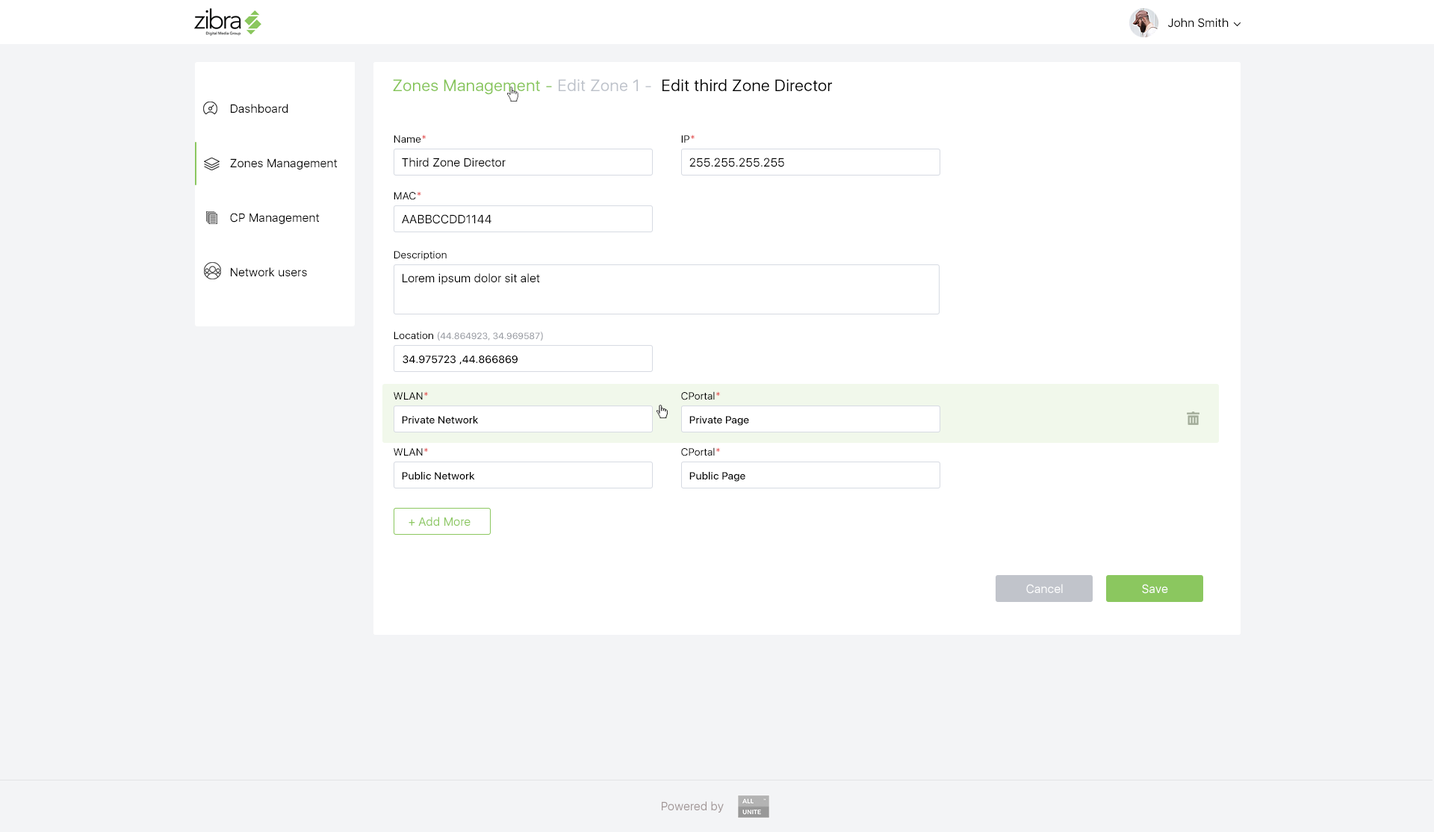
<style>
.page{position:relative;width:1434px;height:832px;background:#f3f4f6}
.page>*{position:absolute;margin:0}
.t1{font:11.9px "SFUIDisplay-Regular";letter-spacing:0.02em;color:#000000}
.t2{font:16.4px "SFUIDisplay-Regular";letter-spacing:0.02em;color:#86c559}
.t3{font:16.4px "SFUIDisplay-Regular";letter-spacing:0.02em;color:#bdc2ca}
.t4{font:16.4px "SFUIDisplay-Regular";letter-spacing:0.02em;color:#000000}
.t5{font:11.9px/54.5px "SFUIDisplay-Regular";letter-spacing:0.02em;color:#000000}
.t6{font:10.5px "SFUIDisplay-Regular";letter-spacing:0.02em;color:#000000}
.t7{font:10.5px "SFUIDisplay-Regular";letter-spacing:0.02em;color:#e23a3a}
.t8{font:9px "SFUIDisplay-Medium";letter-spacing:0.02em;color:#9b9ea5}
.t9{font:10.5px "SFUIDisplay-Regular";letter-spacing:0.02em;color:#9b9ea5}
.t10{font:10.5px "SFUIDisplay-Medium";letter-spacing:0.02em;color:#000000}
.t11{font:11.9px "SFUIDisplay-Regular";letter-spacing:0.02em;color:#8bc75f}
.t12{font:11.9px "SFUIDisplay-Regular";letter-spacing:0.02em;color:#ffffff}
.t13{font:11.9px "SFUIDisplay-Regular";letter-spacing:0.02em;color:#a19696}
</style>
<div class="page">
<p class="t1" style="left:1168px;top:18px;width:60px;height:10px">John Smith</p>
<p class="t2" style="left:393px;top:79px;width:159px;height:16px">- Zones Management</p>
<p class="t3" style="left:559px;top:79px;width:92px;height:12px">- Edit Zone 1</p>
<p class="t4" style="left:662px;top:79px;width:170px;height:12px">Edit third Zone Director</p>
<p class="t5" style="left:230px;top:104px;width:107px;height:172px;text-align:right">Dashboard<br>Zones Management<br>CP Management<br>Network users</p>
<p class="t6" style="left:393px;top:134px;width:33px;height:9px"><span class="t7">*</span>Name</p>
<p class="t6" style="left:681px;top:134px;width:13px;height:9px"><span class="t7">*</span>IP</p>
<p class="t1" style="left:402px;top:158px;width:103px;height:9px">Third Zone Director</p>
<p class="t1" style="left:689px;top:158px;width:95px;height:9px">255.255.255.255</p>
<p class="t6" style="left:393px;top:191px;width:28px;height:9px">*MAC</p>
<p class="t1" style="left:402px;top:214px;width:89px;height:10px">AABBCCDD1144</p>
<p class="t6" style="left:393px;top:251px;width:54px;height:10px">Description</p>
<p class="t1" style="left:402px;top:273px;width:138px;height:11px">Lorem ipsum dolor sit alet</p>
<p class="t8" style="left:393px;top:332px;width:150px;height:8px"><span class="t9"> (</span><span class="t6">Location </span><span class="t9">(</span>44.864923, 34.969587</p>
<p class="t10" style="left:402px;top:355px;width:115px;height:9px">44.866869, 34.975723</p>
<p class="t6" style="left:393px;top:391px;width:35px;height:8px"><span class="t7">*</span>WLAN</p>
<p class="t6" style="left:681px;top:391px;width:39px;height:9px">*CPortal</p>
<p class="t10" style="left:402px;top:416px;width:77px;height:7px">Private Network</p>
<p class="t10" style="left:689px;top:416px;width:60px;height:10px">Private Page</p>
<p class="t6" style="left:393px;top:447px;width:35px;height:8px"><span class="t7">*</span>WLAN</p>
<p class="t6" style="left:681px;top:447px;width:39px;height:9px">*CPortal</p>
<p class="t10" style="left:402px;top:471px;width:73px;height:8px">Public Network</p>
<p class="t10" style="left:689px;top:471px;width:56px;height:11px">Public Page</p>
<p class="t11" style="left:408px;top:517px;width:62px;height:9px">Add More +</p>
<p class="t12" style="left:1026px;top:584px;width:36px;height:10px">Cancel</p>
<p class="t12" style="left:1142px;top:584px;width:26px;height:10px">Save</p>
<p class="t13" style="left:662px;top:801px;width:62px;height:11px">Powered by</p>
</div>
